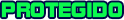
<style>
.page{position:relative;width:124px;height:20px;background:#0bfa4e}
.page>*{position:absolute;margin:0}
.t1{font:22.7px "DFSoGeiStd-W9";letter-spacing:-0.017em;color:#0bfa4e;scale:0.89 1}
</style>
<div class="page">
<p class="t1" style="left:1px;top:2px;width:121px;height:16px">PROTEGIDO</p>
</div>
